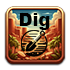
<style>
.page{position:relative;width:70px;height:70px;background:#ffffff}
.page>*{position:absolute;margin:0}
.t1{font:18px "Arial-Black";color:#000000}
</style>
<div class="page">
<p class="t1" style="left:19px;top:13px;width:31px;height:17px">Dig</p>
</div>
